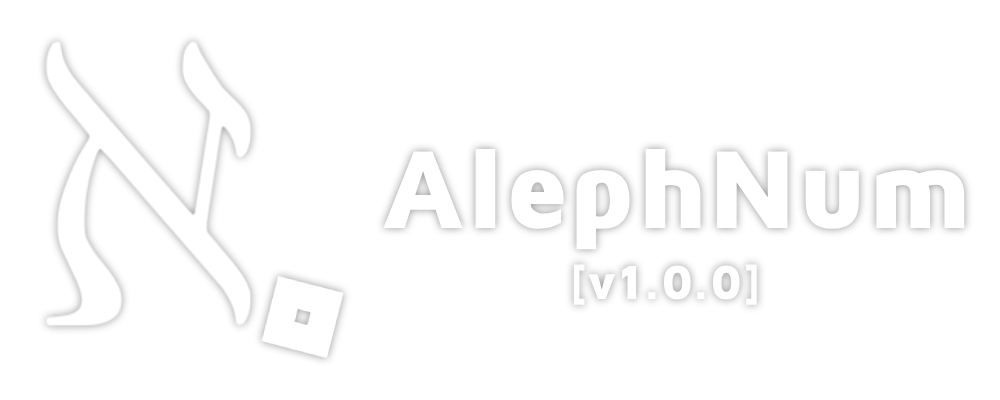
<style>
.page{position:relative;width:1000px;height:400px;background:#ffffff}
.page>*{position:absolute;margin:0}
.t1{font:114.7px "MavenProBlack";color:#ffffff}
.t2{font:49.6px "MavenProBlack";color:#ffffff}
</style>
<div class="page">
<p class="t1" style="left:383px;top:149px;width:582px;height:101px">AlephNum</p>
<p class="t2" style="left:573px;top:264px;width:184px;height:41px">[v1.0.0]</p>
</div>
